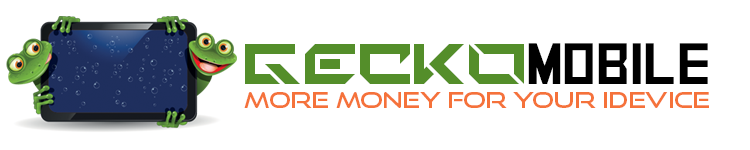
<style>
.page{position:relative;width:750px;height:150px;background:#ffffff}
.page>*{position:absolute;margin:0}
.t1{font:80px "TechnoHideo";color:#548e2a}
.t2{font:58px "SquareFont";color:#000000}
.t3{font:22px "GoodTimesRg-Regular";color:#f5723a;scale:1.04 1}
</style>
<div class="page">
<p class="t1" style="left:245px;top:44px;width:279px;height:40px">GECKO</p>
<p class="t2" style="left:528px;top:43px;width:180px;height:41px">MOBILE</p>
<p class="t3" style="left:244px;top:92px;width:465px;height:16px">MORE MONEY FOR YOUR IDEVICE</p>
</div>
